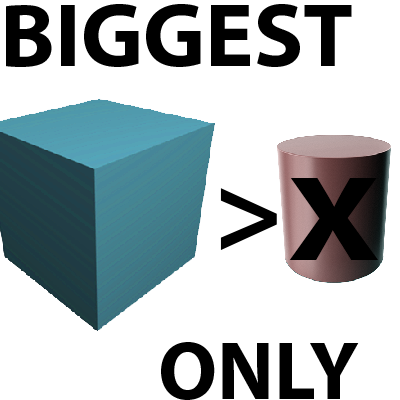
<style>
.page{position:relative;width:400px;height:400px;background:#ffffff}
.page>*{position:absolute;margin:0}
.t1{font:91.1px "MyriadPro-Bold";color:#000000}
.t2{font:121.1px "MyriadPro-Bold";color:#000000;scale:1.26 1}
.t3{font:116.1px "MyriadPro-Bold";color:#000000}
.t4{font:82.4px "MyriadPro-Bold";color:#000000}
</style>
<div class="page">
<p class="t1" style="left:6px;top:4px;width:346px;height:63px">BIGGEST</p>
<p class="t2" style="left:289px;top:178px;width:89px;height:82px">X</p>
<p class="t3" style="left:220px;top:188px;width:57px;height:62px">&gt;</p>
<p class="t4" style="left:161px;top:342px;width:198px;height:58px">ONLY</p>
</div>
